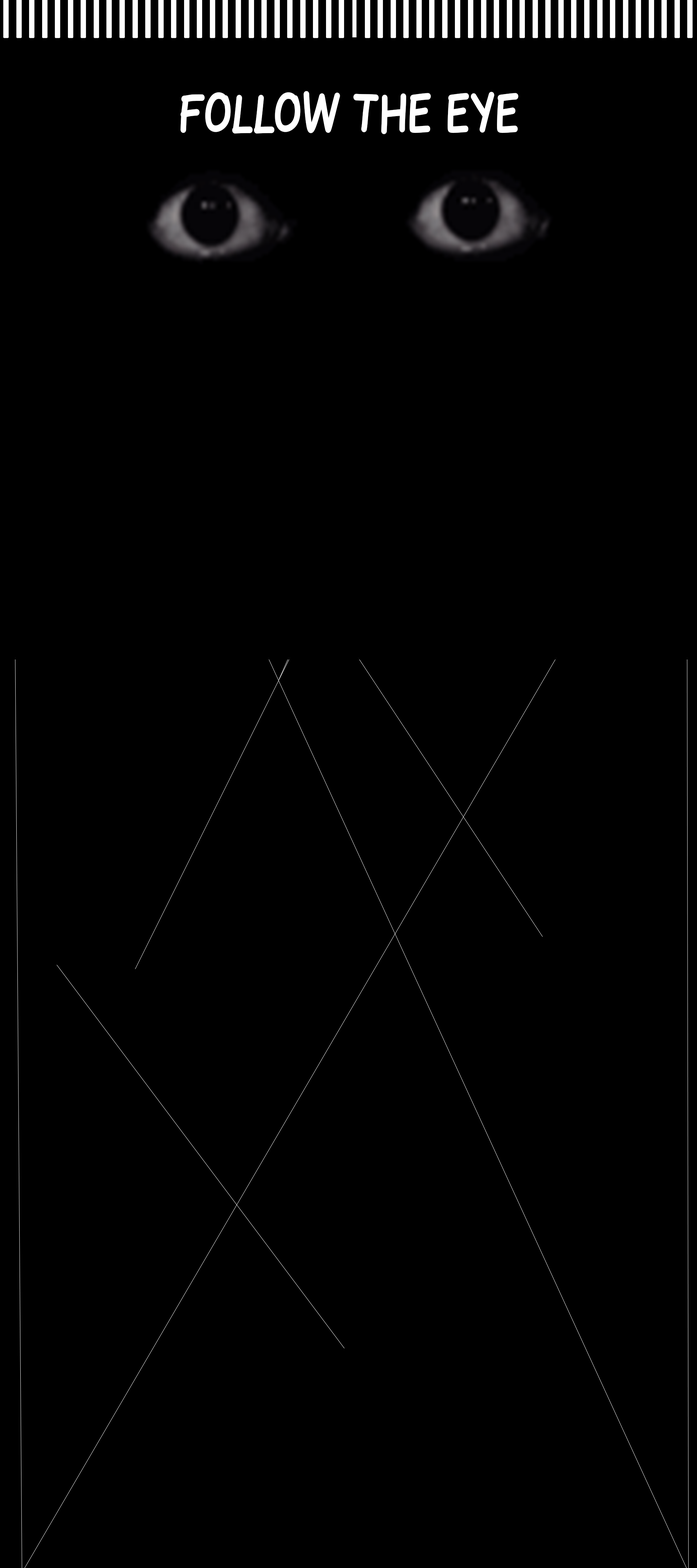
<style>
.page{position:relative;width:697px;height:1568px;background:#000000}
.page>*{position:absolute;margin:0}
.t1{font:52.3px "ArialMT";color:#ffffff;font-weight:bold;scale:0.81 1}
.t2{font:52.3px "GelPen";color:#ffffff;font-weight:bold;scale:0.81 1}
</style>
<div class="page">
<p class="t1" style="left:3px;top:0px;width:690px;height:38px">IIIIIIIIIIIIIIIIIIIIIIIIIIIIIIIIIIIIIIIIIIIIIIIIIIIIII</p>
<p class="t2" style="left:180px;top:91px;width:338px;height:43px">FOLLOW THE EYE</p>
</div>
